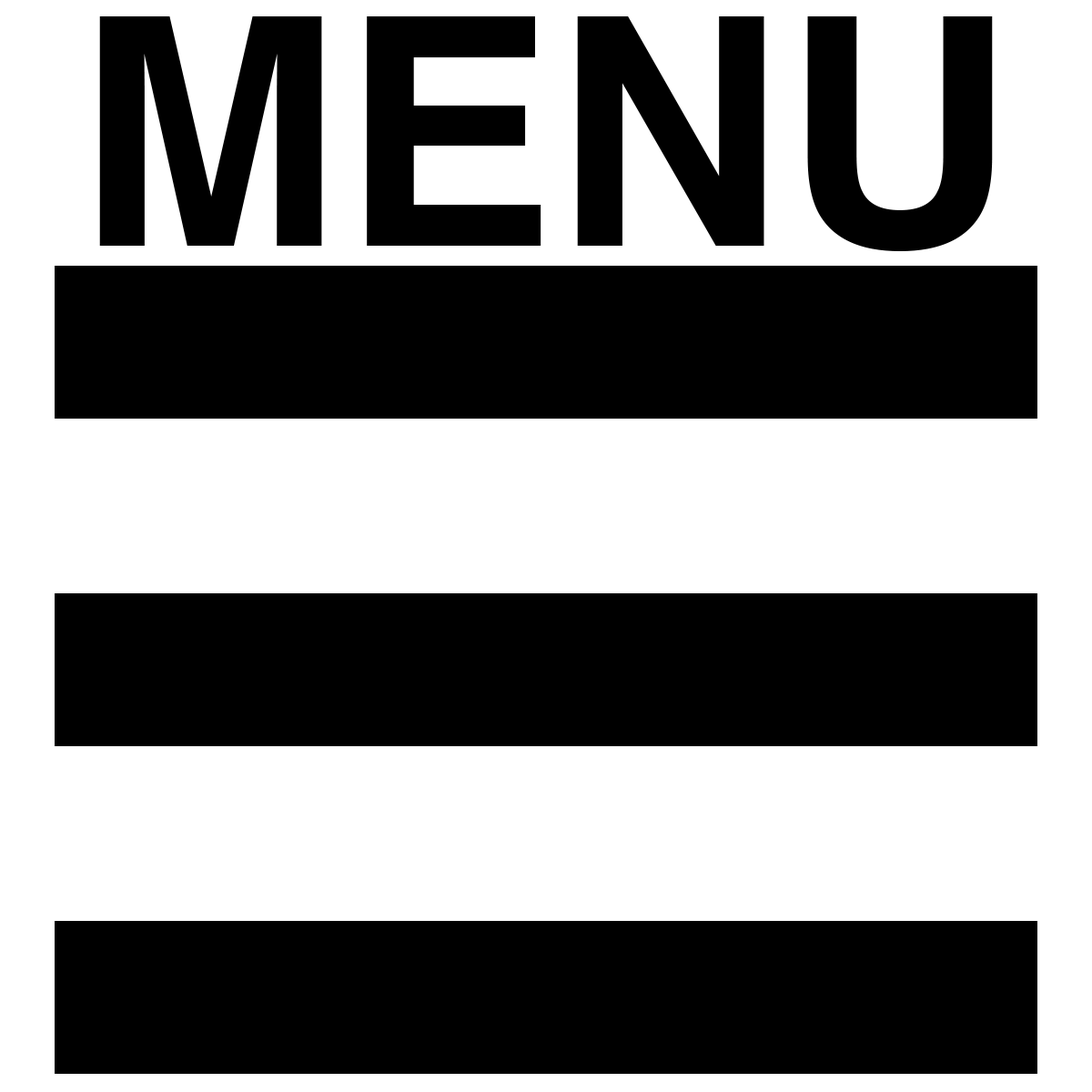
<style>
.page{position:relative;width:1092px;height:1092px;background:#ffffff}
.page>*{position:absolute;margin:0}
.t1{font:318.5px "Helvetica-Bold";color:#000000}
</style>
<div class="page">
<p class="t1" style="left:99px;top:16px;width:894px;height:235px">MENU</p>
</div>
